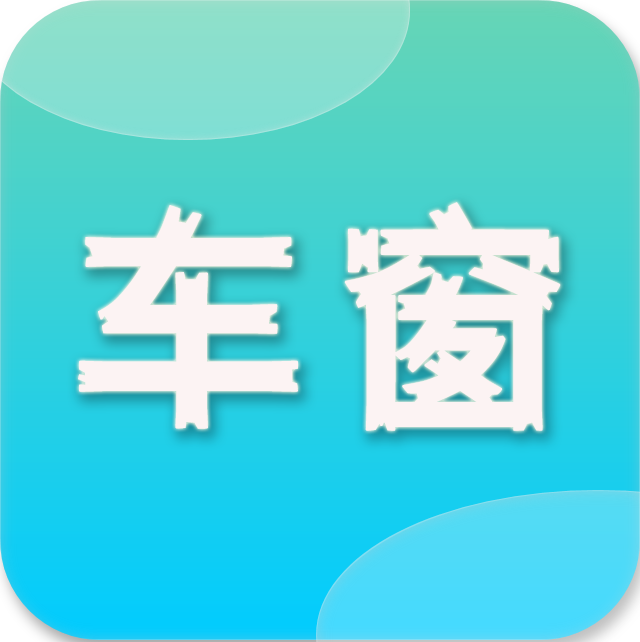
<style>
.page{position:relative;width:640px;height:642px}
.page>*{position:absolute;margin:0}
.t1{font:240px "HYb5gj";letter-spacing:0.08em;color:#fbf3f3;text-transform:uppercase;font-weight:bold}
</style>
<div class="page">
<p class="t1" style="left:78px;top:202px;width:483px;height:229px">车窗</p>
</div>
